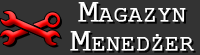
<style>
.page{position:relative;width:200px;height:55px;background:#333333}
.page>*{position:absolute;margin:0}
.t1{font:33.4px/29.2px "CourierNewPSMT";color:#ffffff;font-variant:small-caps;font-weight:bold}
</style>
<div class="page">
<p class="t1" style="left:70px;top:2px;width:124px;height:49px;text-align:center">Magazyn<br>Menedżer</p>
</div>
